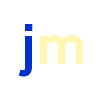
<style>
.page{position:relative;width:100px;height:100px;background:#ffffff}
.page>*{position:absolute;margin:0}
.t1{font:58.3px "HKGrotesk-Bold";letter-spacing:-0.005em;color:#0033cc}
.t2{font:58.3px "HKGrotesk-Bold";letter-spacing:-0.005em;color:#fff7b1}
</style>
<div class="page">
<p class="t1" style="left:18px;top:24px;width:65px;height:53px">j<span class="t2">m</span></p>
</div>
